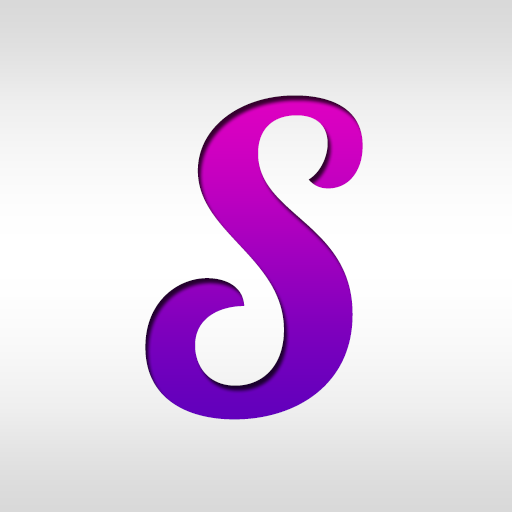
<style>
.page{position:relative;width:512px;height:512px}
.page>*{position:absolute;margin:0}
.t1{font:420px "Lobster1.4"}
</style>
<div class="page">
<p class="t1" style="left:145px;top:95px;width:218px;height:325px">S</p>
</div>
